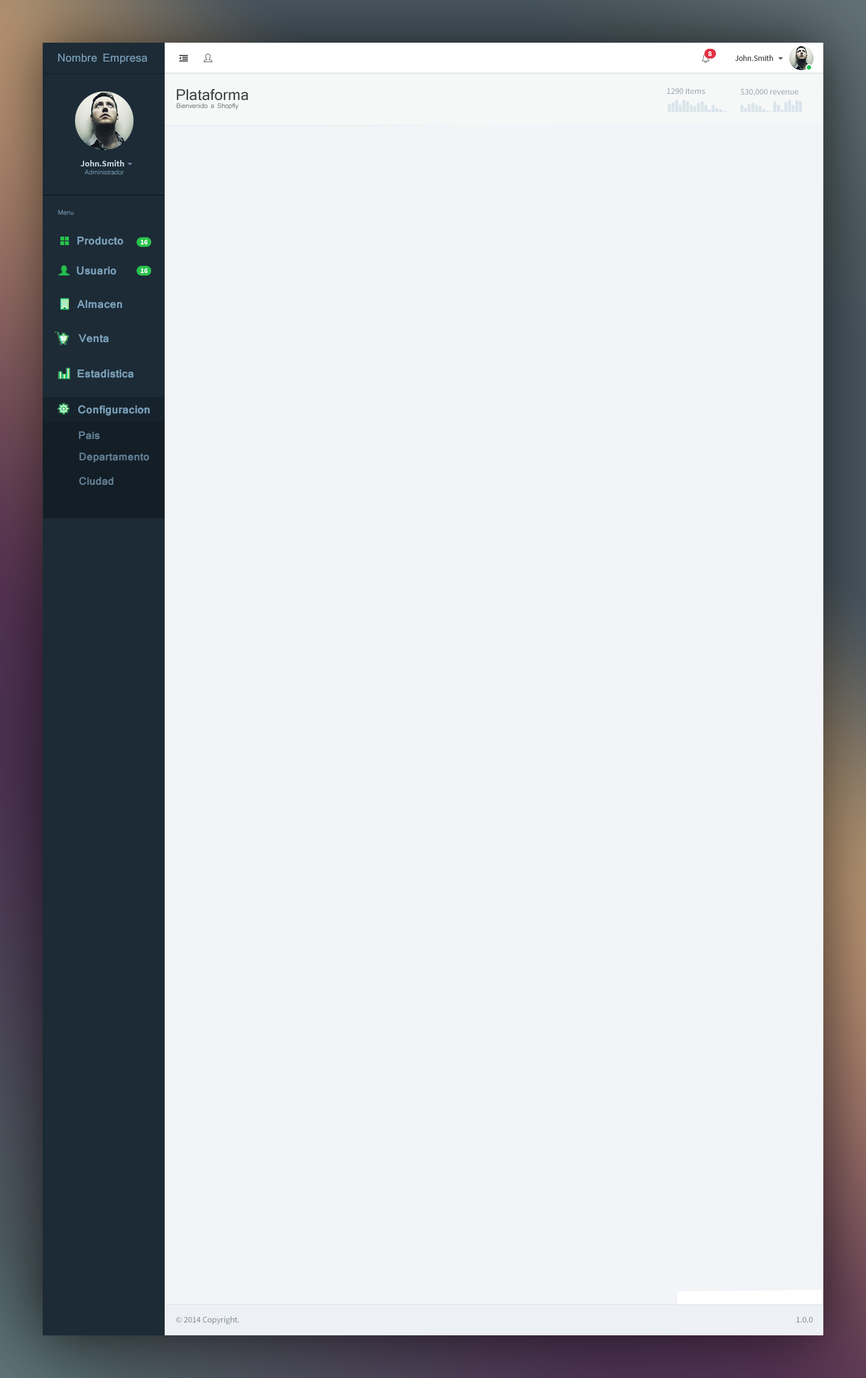
<style>
.page{position:relative;width:866px;height:1378px;background:#f2f4f8}
.page>*{position:absolute;margin:0}
.t1{font:10.7px "Mangal";color:#7ca1bb}
.t2{font:14.6px "Mangal";color:#424344}
.t3{font:6.1px "Mangal"}
.t4{font:6.1px "Mangal";color:#7ca1bb}
.t5{font:10.7px "Mangal-Bold";color:#7ca1bb}
.t6{font:10.4px "Mangal-Bold";color:#628095}
</style>
<div class="page">
<p class="t1" style="left:58px;top:54px;width:89px;height:10px">Nombre Empresa</p>
<p class="t2" style="left:177px;top:89px;width:71px;height:12px">Plataforma</p>
<p class="t3" style="left:176px;top:103px;width:62px;height:7px">Bienvenido a Shopfly</p>
<p class="t4" style="left:85px;top:169px;width:39px;height:6px">Administrador</p>
<p class="t4" style="left:58px;top:210px;width:16px;height:5px">Menu</p>
<p class="t5" style="left:77px;top:237px;width:46px;height:8px">Producto</p>
<p class="t5" style="left:77px;top:266px;width:39px;height:9px">Usuario</p>
<p class="t5" style="left:77px;top:300px;width:45px;height:8px">Almacen</p>
<p class="t5" style="left:79px;top:334px;width:30px;height:9px">Venta</p>
<p class="t5" style="left:77px;top:369px;width:56px;height:9px">Estadistica</p>
<p class="t5" style="left:78px;top:405px;width:72px;height:11px">Configuracion</p>
<p class="t6" style="left:79px;top:431px;width:21px;height:8px">Pais</p>
<p class="t6" style="left:79px;top:452px;width:70px;height:11px">Departamento</p>
<p class="t6" style="left:79px;top:477px;width:34px;height:8px">Ciudad</p>
</div>
